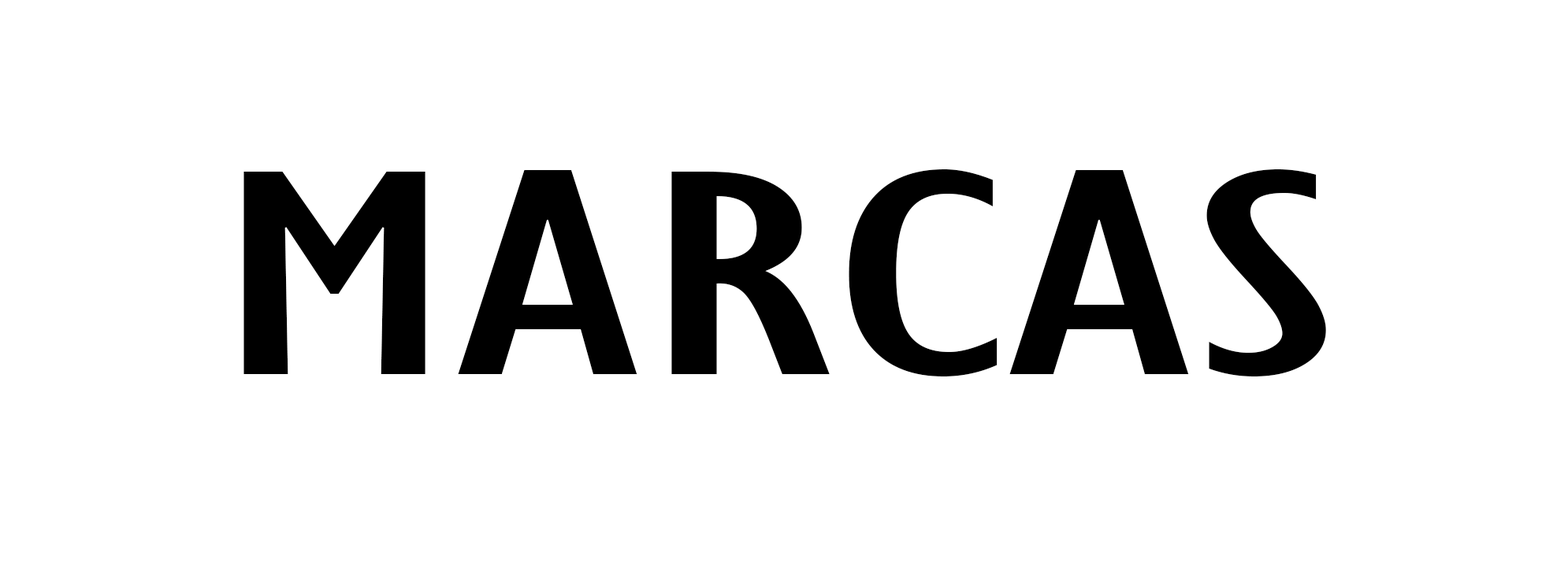
<style>
.page{position:relative;width:1568px;height:567px;background:#ffffff}
.page>*{position:absolute;margin:0}
.t1{font:303.3px "GillSansMT-Condensed";color:#000000;scale:1.73 1}
</style>
<div class="page">
<p class="t1" style="left:243px;top:169px;width:1083px;height:208px">MARCAS</p>
</div>
